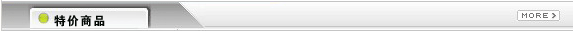
<style>
.page{position:relative;width:573px;height:31px}
.page>*{position:absolute;margin:0}
.t1{font:12px "FZDHTJW--GB1-0";letter-spacing:0.1em;color:#010602}
</style>
<div class="page">
<p class="t1" style="left:54px;top:15px;width:51px;height:12px">特价商品</p>
</div>
